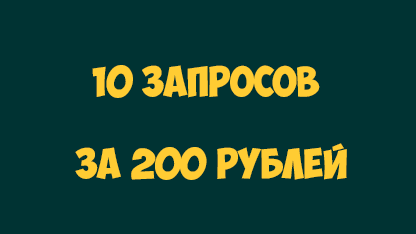
<style>
.page{position:relative;width:416px;height:234px;background:#003333}
.page>*{position:absolute;margin:0}
.t1{font:30px "ObelixPro";color:#ffcc33}
</style>
<div class="page">
<p class="t1" style="left:92px;top:65px;width:228px;height:33px">10 запросов</p>
<p class="t1" style="left:75px;top:143px;width:272px;height:37px">за 200 рублей</p>
</div>
